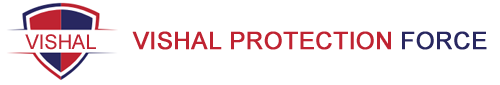
<style>
.page{position:relative;width:500px;height:85px;background:#ffffff}
.page>*{position:absolute;margin:0}
.t1{font:20px "ArialMT";color:#bf2331}
.t2{font:24px "ArialMT";color:#bf2331;font-weight:bold}
.t3{font:24px "ArialMT";color:#282760;font-weight:bold}
</style>
<div class="page">
<p class="t1" style="left:25px;top:34px;width:71px;height:16px">VISHAL</p>
<p class="t2" style="left:132px;top:31px;width:355px;height:19px">VISHAL PROTECTION <span class="t3">FORCE</span></p>
</div>
